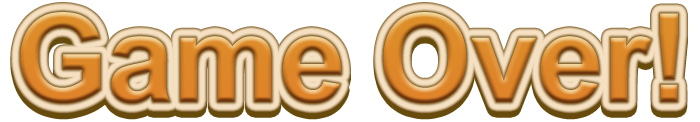
<style>
.page{position:relative;width:700px;height:122px;background:#ffffff}
.page>*{position:absolute;margin:0}
.t1{font:122.8px "Arial-BoldMT";scale:0.97 1}
</style>
<div class="page">
<p class="t1" style="left:20px;top:12px;width:658px;height:92px">Game Over!</p>
<p class="t1" style="left:20px;top:18px;width:658px;height:92px">Game Over!</p>
</div>
